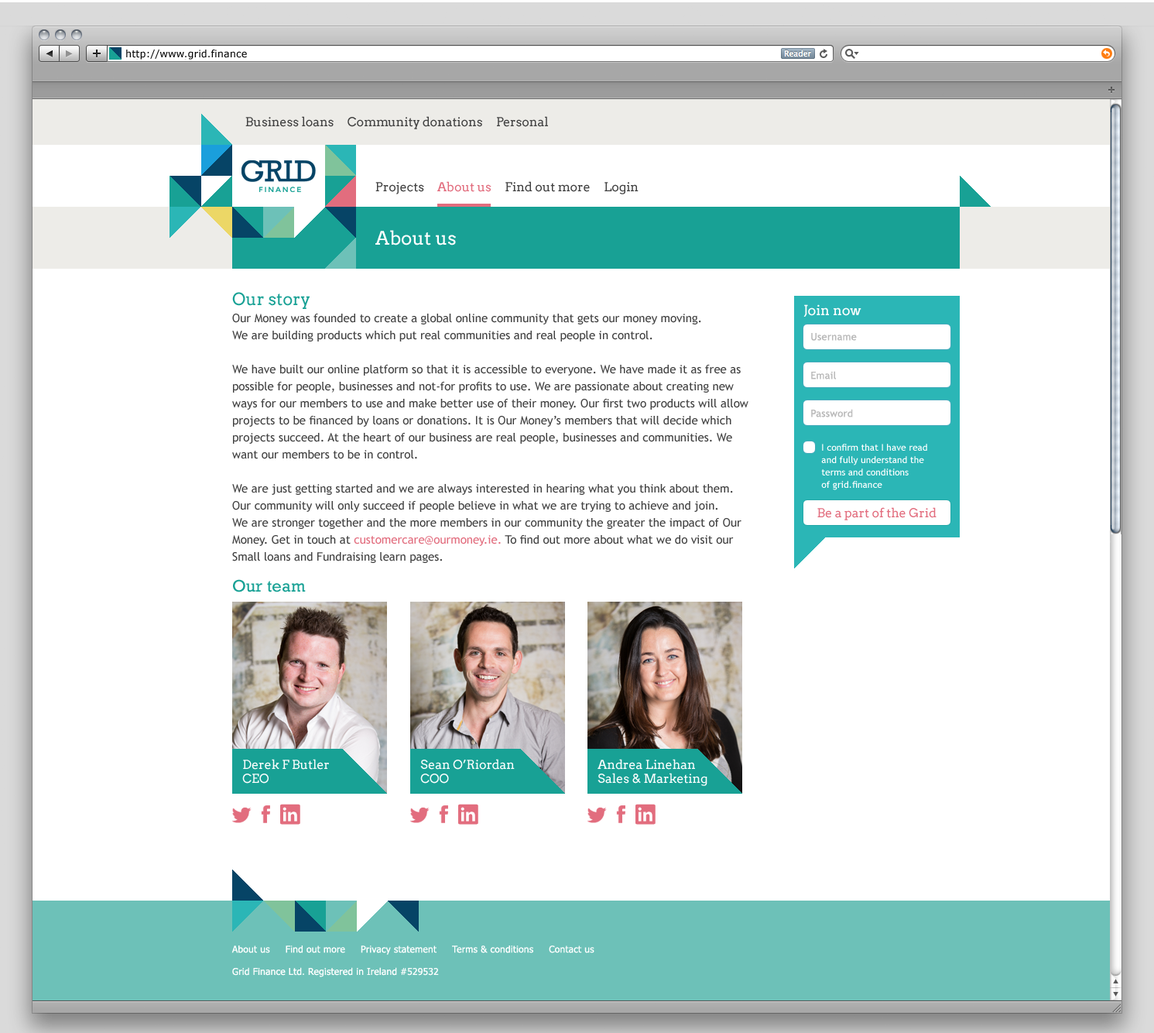
<style>
.page{position:relative;width:1154px;height:1033px;background:#ffffff}
.page>*{position:absolute;margin:0}
.t1{font:10.1px "Verdana";color:#000000}
.t2{font:12.4px "Arvo";color:#414141}
.t3{font:12.4px "Arvo";color:#e26d7e}
.t4{font:18.6px "Arvo";color:#ffffff}
.t5{font:11.6px/17px "TrebuchetMS";color:#414141}
.t6{font:17px/15.5px "Arvo";color:#18a195}
.t7{font:11.6px/17px "TrebuchetMS";color:#e26d7e}
.t8{font:17px/15.5px "Rockwell";color:#18a195}
.t9{font:13.9px "Arvo";color:#ffffff}
.t10{font:10.1px "TrebuchetMS";letter-spacing:0.02em;color:#b9b9b9}
.t11{font:9.3px/12.4px "TrebuchetMS";color:#ffffff}
.t12{font:12.4px/13.9px "Arvo";color:#ffffff}
.t13{font:9.3px "Tahoma";letter-spacing:0.02em;color:#ffffff}
</style>
<div class="page">
<p class="t1" style="left:126px;top:50px;width:121px;height:10px">http://www.grid.finance</p>
<p class="t2" style="left:245px;top:116px;width:303px;height:13px">Business loans     Community donations     Personal</p>
<p class="t2" style="left:376px;top:181px;width:263px;height:13px">Projects     <span class="t3">About us    </span> Find out more     Login</p>
<p class="t4" style="left:376px;top:230px;width:80px;height:15px">About us</p>
<p class="t5" style="left:232px;top:292px;width:517px;height:300px"><span class="t6">Our story<br></span>Our Money was founded to create a global online community that gets our money moving. <br>We are building products which put real communities and real people in control.<br><br>We have built our online platform so that it is accessible to everyone. We have made it as free as <br>possible for people, businesses and not-for profits to use. We are passionate about creating new ways for our members to use and make better use of their money. Our first two products will allow projects to be financed by loans or donations. It is Our Money’s members that will decide which projects succeed. At the heart of our business are real people, businesses and communities. We want our members to be in control.<br><br>We are just getting started and we are always interested in hearing what you think about them. <br>Our community will only succeed if people believe in what we are trying to achieve and join. <br>We are stronger together and the more members in our community the greater the impact of Our Money. Get in touch at <span class="t7">customercare@ourmoney.ie.</span> To find out more about what we do visit our Small loans and Fundraising learn pages.<br><br><span class="t8">Our team</span></p>
<p class="t9" style="left:804px;top:304px;width:58px;height:13px">Join now</p>
<p class="t10" style="left:811px;top:333px;width:46px;height:8px">Username</p>
<p class="t10" style="left:811px;top:371px;width:25px;height:8px">Email</p>
<p class="t10" style="left:811px;top:409px;width:42px;height:8px">Password</p>
<p class="t11" style="left:822px;top:444px;width:106px;height:46px">I confirm that I have read <br>and fully understand the <br>terms and conditions <br>of grid.finance</p>
<p class="t3" style="left:818px;top:507px;width:119px;height:13px">Be a part of the Grid</p>
<p class="t12" style="left:242px;top:759px;width:87px;height:25px">Derek F Butler<br>CEO</p>
<p class="t12" style="left:420px;top:759px;width:95px;height:25px">Sean O’Riordan<br>COO</p>
<p class="t12" style="left:598px;top:759px;width:110px;height:27px">Andrea Linehan<br>Sales &amp; Marketing</p>
<p class="t13" style="left:232px;top:945px;width:363px;height:32px">About us     Find out more     Privacy statement     Terms &amp; conditions     Contact us<br><br>Grid Finance Ltd. Registered in Ireland #529532</p>
</div>
